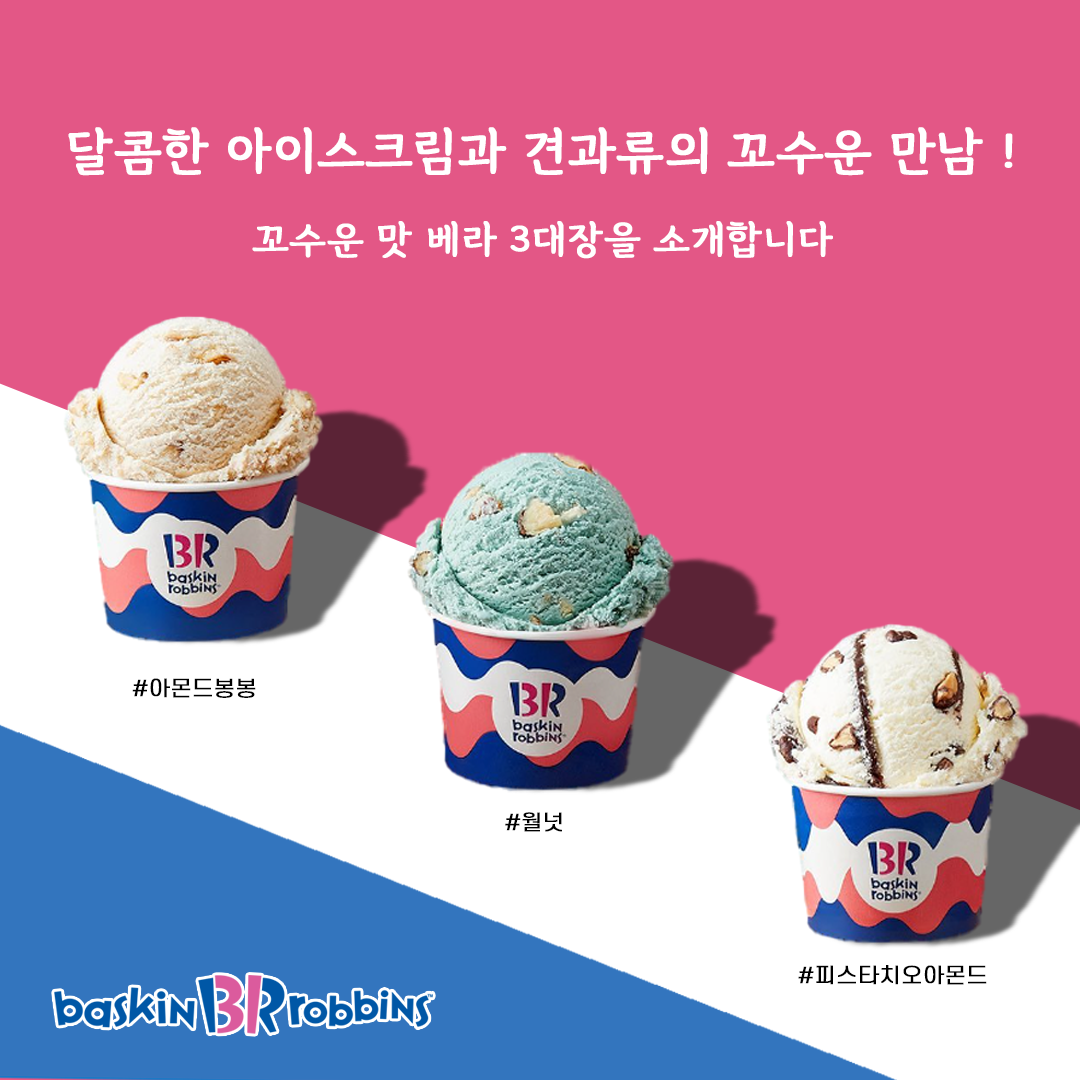
<style>
.page{position:relative;width:1080px;height:1080px;background:#e35786}
.page>*{position:absolute;margin:0}
.t1{font:54.2px "GangwonEduAllBold";letter-spacing:0.005em;color:#ffffff;font-weight:bold;scale:1.05 1}
.t2{font:41.7px "GangwonEduAllBold";letter-spacing:0.005em;color:#ffffff;font-weight:bold;scale:1.05 1}
.t3{font:20.8px "S-CoreDream-4Regular";letter-spacing:0.005em;color:#000000;font-weight:bold;scale:1.05 1}
</style>
<div class="page">
<p class="t1" style="left:68px;top:127px;width:945px;height:132px;text-align:center">달콤한 아이스크림과 견과류의 꼬수운 만남 !<br><span class="t2">꼬수운 맛 베라 3대장을 소개합니다</span></p>
<p class="t3" style="left:132px;top:678px;width:124px;height:20px">#아몬드봉봉</p>
<p class="t3" style="left:505px;top:812px;width:57px;height:20px">#월넛</p>
<p class="t3" style="left:798px;top:965px;width:189px;height:20px">#피스타치오아몬드</p>
</div>
